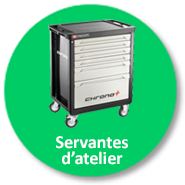
<style>
.page{position:relative;width:185px;height:185px;background:#00cc66}
.page>*{position:absolute;margin:0}
.t1{font:18px/16px "Calibri-Bold";color:#ffffff}
</style>
<div class="page">
<p class="t1" style="left:56px;top:136px;width:72px;height:29px;text-align:center">Servantes <br>d’atelier</p>
</div>
